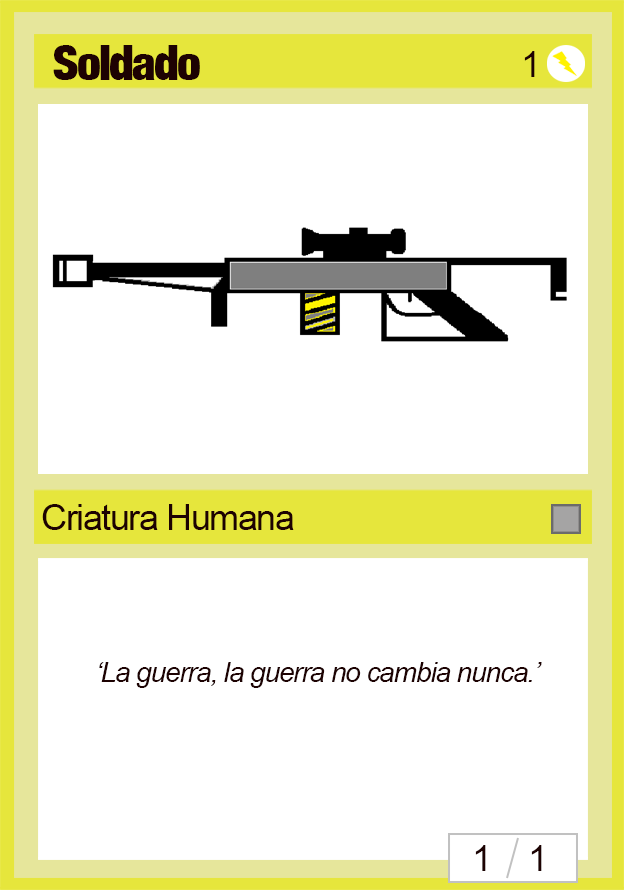
<style>
.page{position:relative;width:624px;height:890px;background:#ffffff}
.page>*{position:absolute;margin:0}
.t1{font:48px "Harvest";letter-spacing:-0.04em;color:#1d0202}
.t2{font:36px "ArialMT";letter-spacing:-0.04em;color:#1d0202}
.t3{font:28px "Arial-ItalicMT";letter-spacing:-0.04em;color:#1d0202}
</style>
<div class="page">
<p class="t1" style="left:53px;top:45px;width:147px;height:35px">Soldado</p>
<p class="t2" style="left:524px;top:51px;width:11px;height:26px">1</p>
<p class="t2" style="left:42px;top:504px;width:252px;height:26px">Criatura Humana</p>
<p class="t3" style="left:99px;top:662px;width:443px;height:26px">‘La guerra, la guerra no cambia nunca.’</p>
<p class="t2" style="left:475px;top:845px;width:11px;height:26px">1</p>
<p class="t2" style="left:531px;top:845px;width:11px;height:26px">1</p>
</div>
